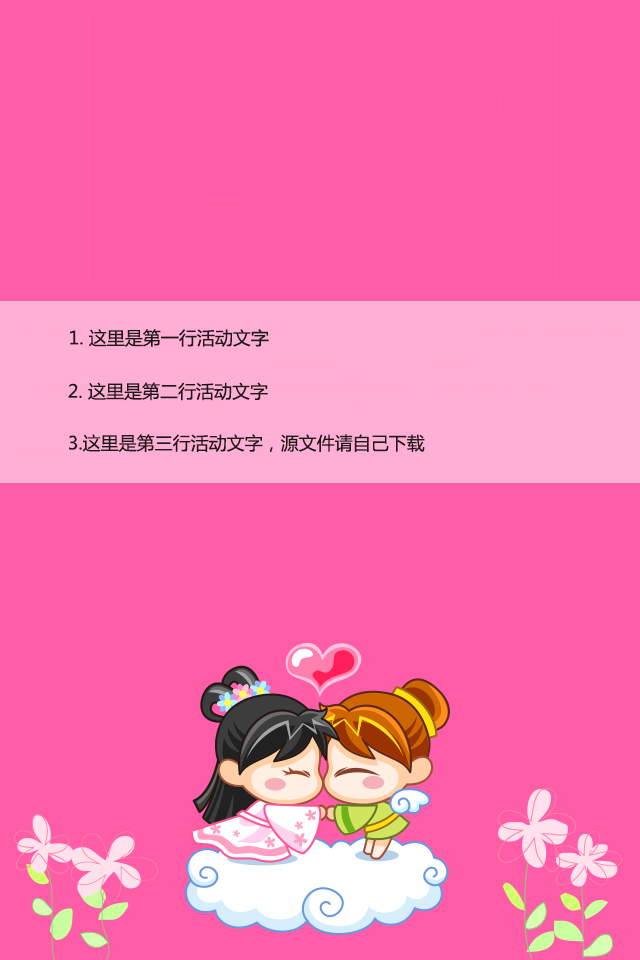
<style>
.page{position:relative;width:640px;height:960px;background:#ff5da8}
.page>*{position:absolute;margin:0}
.t1{font:18px "MicrosoftYaHei";color:#1b1919}
</style>
<div class="page">
<p class="t1" style="left:70px;top:329px;width:199px;height:18px">1. 这里是第一行活动文字</p>
<p class="t1" style="left:68px;top:382px;width:200px;height:19px">2. 这里是第二行活动文字</p>
<p class="t1" style="left:69px;top:434px;width:356px;height:18px">3.这里是第三行活动文字，源文件请自己下载</p>
</div>
